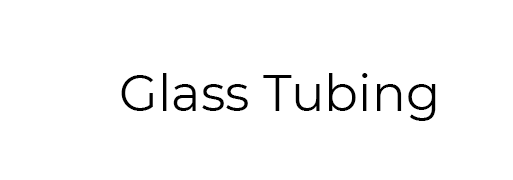
<style>
.page{position:relative;width:513px;height:180px;background:#ffffff}
.page>*{position:absolute;margin:0}
.t1{font:50px "Montserrat-Regular";color:#000000}
</style>
<div class="page">
<p class="t1" style="left:121px;top:73px;width:315px;height:48px">Glass Tubing</p>
</div>
